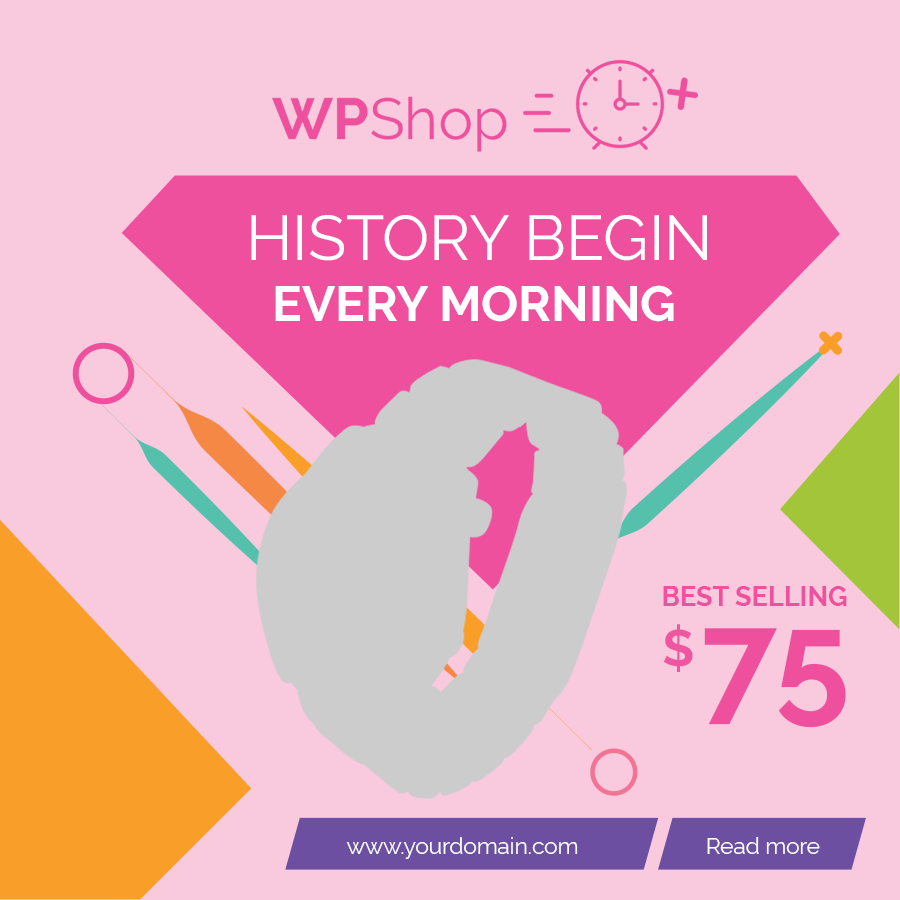
<style>
.page{position:relative;width:900px;height:900px;background:#f9c9de}
.page>*{position:absolute;margin:0}
.t1{font:63px "Raleway-Regular";color:#ffffff}
.t2{font:49.1px "Raleway-Bold";color:#ffffff}
.t3{font:27.2px "Raleway-Bold";color:#ef519d}
.t4{font:51.3px "Raleway-Bold";color:#ef569f}
.t5{font:135px "Raleway-Bold";color:#ef509d}
.t6{font:22.5px "Raleway-Regular";color:#ffffff}
</style>
<div class="page">
<p class="t1" style="left:251px;top:215px;width:456px;height:46px">HISTORY BEGIN</p>
<p class="t2" style="left:275px;top:285px;width:399px;height:37px">EVERY MORNING</p>
<p class="t3" style="left:663px;top:586px;width:184px;height:20px">BEST SELLING</p>
<p class="t4" style="left:663px;top:624px;width:30px;height:48px">$</p>
<p class="t5" style="left:704px;top:628px;width:142px;height:100px">75</p>
<p class="t6" style="left:346px;top:837px;width:232px;height:22px">www.yourdomain.com</p>
<p class="t6" style="left:707px;top:837px;width:113px;height:17px">Read more</p>
</div>
